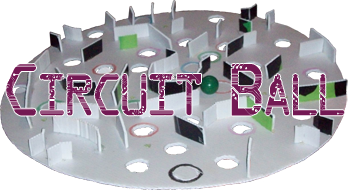
<style>
.page{position:relative;width:350px;height:190px;background:#ffffff}
.page>*{position:absolute;margin:0}
.t1{font:59.5px "Circuit";color:#731953;scale:0.9 1}
</style>
<div class="page">
<p class="t1" style="left:6px;top:64px;width:339px;height:52px">Circuit Ball</p>
</div>
